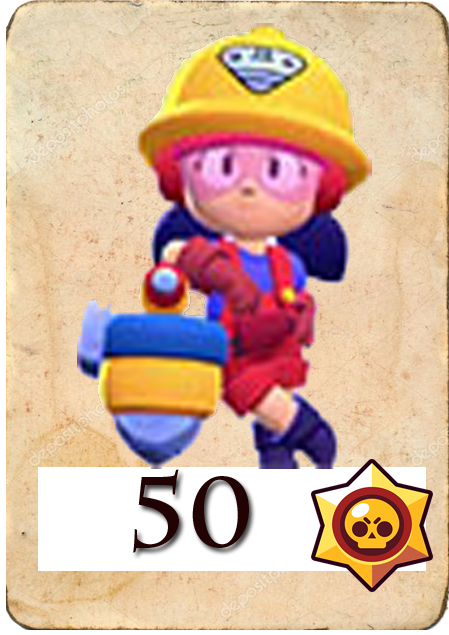
<style>
.page{position:relative;width:449px;height:635px}
.page>*{position:absolute;margin:0}
.t1{font:100px "CharlemagneStd-Bold";color:#210303}
</style>
<div class="page">
<p class="t1" style="left:133px;top:469px;width:116px;height:84px">50</p>
</div>
